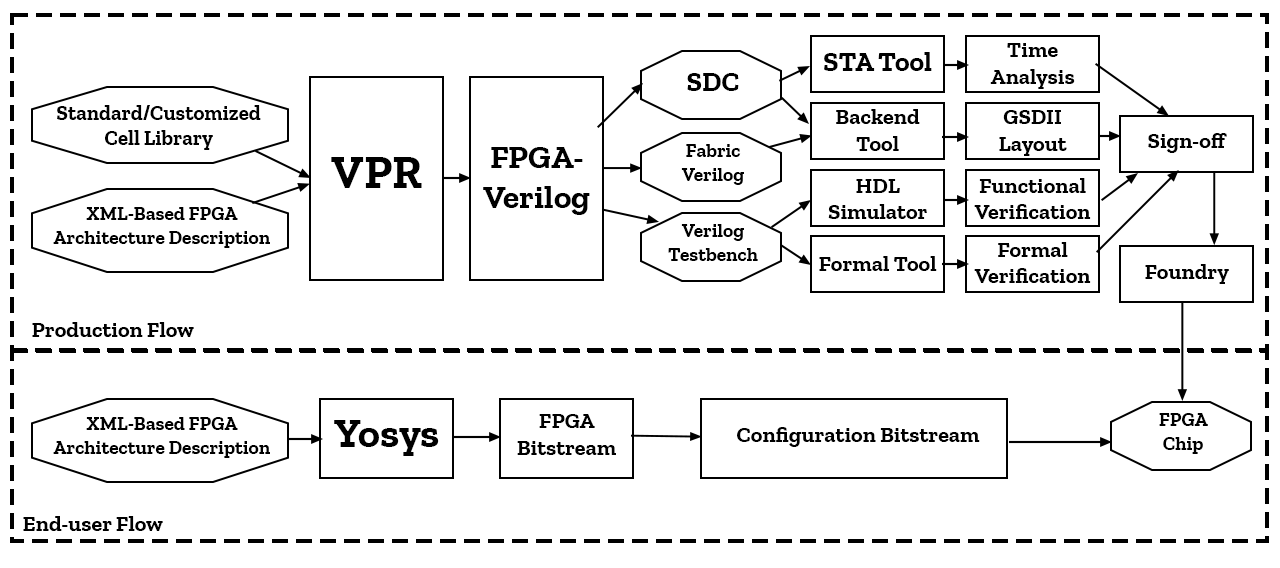
<style>
.page{position:relative;width:1280px;height:568px;background:#ffffff}
.page>*{position:absolute;margin:0}
.t1{font:27.8px "ZillaSlab-Bold";color:#000000}
.t2{font:22.2px "ZillaSlab-Bold";color:#000000}
.t3{font:20.8px "ZillaSlab-Bold";color:#000000}
.t4{font:33.3px "ZillaSlab-Bold";color:#000000}
.t5{font:19.4px "ZillaSlab-Bold";color:#000000}
.t6{font:47.2px "ZillaSlab-Bold";color:#000000}
.t7{font:41.7px "ZillaSlab-Bold";color:#000000}
</style>
<div class="page">
<p class="t1" style="left:824px;top:52px;width:108px;height:19px">STA Tool</p>
<p class="t2" style="left:990px;top:43px;width:85px;height:46px;text-align:center">Time Analysis</p>
<p class="t1" style="left:687px;top:73px;width:52px;height:18px">SDC</p>
<p class="t3" style="left:57px;top:105px;width:204px;height:45px;text-align:center">Standard/Customized<br>Cell Library</p>
<p class="t2" style="left:836px;top:109px;width:84px;height:42px;text-align:center">Backend <br>Tool</p>
<p class="t2" style="left:999px;top:110px;width:68px;height:46px;text-align:center">GSDII <br>Layout</p>
<p class="t2" style="left:1148px;top:133px;width:79px;height:20px">Sign-off</p>
<p class="t4" style="left:483px;top:147px;width:107px;height:68px;text-align:center">FPGA- Verilog</p>
<p class="t5" style="left:681px;top:144px;width:63px;height:41px;text-align:center">Fabric Verilog</p>
<p class="t6" style="left:331px;top:157px;width:91px;height:31px">VPR</p>
<p class="t2" style="left:828px;top:179px;width:99px;height:40px;text-align:center">HDL Simulator</p>
<p class="t2" style="left:974px;top:178px;width:117px;height:41px;text-align:center">Functional Verification</p>
<p class="t5" style="left:53px;top:207px;width:217px;height:41px;text-align:center">XML-Based FPGA <br>Architecture Description</p>
<p class="t5" style="left:668px;top:224px;width:90px;height:37px;text-align:center">Verilog Testbench</p>
<p class="t2" style="left:974px;top:242px;width:117px;height:41px;text-align:center">Formal Verification</p>
<p class="t2" style="left:819px;top:256px;width:118px;height:15px">Formal Tool</p>
<p class="t2" style="left:1145px;top:264px;width:84px;height:20px">Foundry</p>
<p class="t2" style="left:32px;top:322px;width:162px;height:15px">Production Flow</p>
<p class="t2" style="left:517px;top:414px;width:99px;height:41px;text-align:center">FPGA <br>Bitstream</p>
<p class="t5" style="left:1159px;top:413px;width:49px;height:41px;text-align:center">FPGA Chip</p>
<p class="t5" style="left:53px;top:417px;width:217px;height:41px;text-align:center">XML-Based FPGA <br>Architecture Description</p>
<p class="t7" style="left:334px;top:420px;width:105px;height:36px">Yosys</p>
<p class="t2" style="left:737px;top:427px;width:243px;height:20px">Configuration Bitstream</p>
<p class="t2" style="left:23px;top:516px;width:140px;height:15px">End-user Flow</p>
</div>
